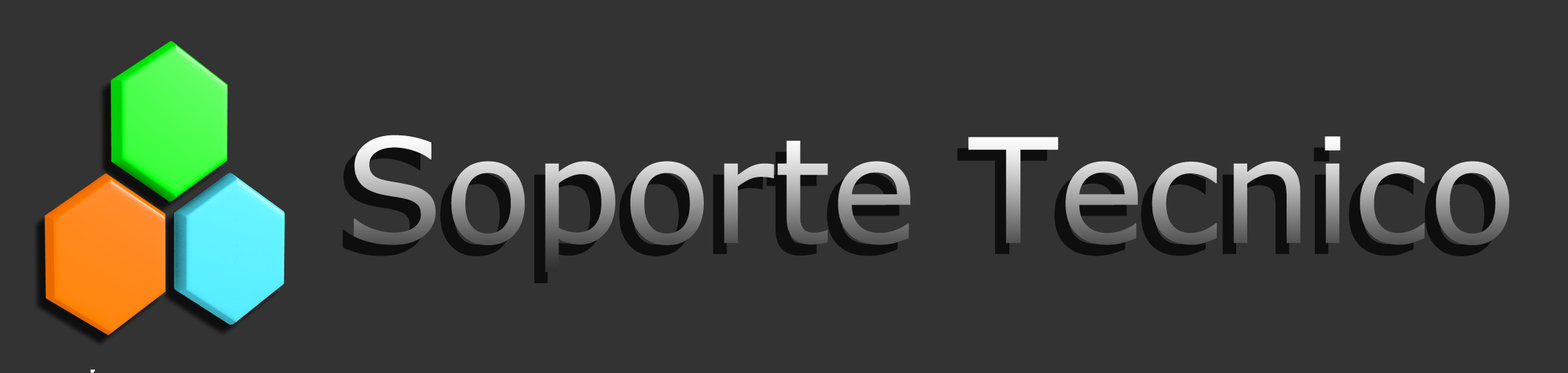
<style>
.page{position:relative;width:1568px;height:373px;background:#333333}
.page>*{position:absolute;margin:0}
.t1{font:145.5px "MSReferenceSansSerif"}
</style>
<div class="page">
<p class="t1" style="left:353px;top:135px;width:1156px;height:137px">Soporte Tecnico</p>
</div>
